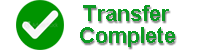
<style>
.page{position:relative;width:200px;height:50px;background:#ffffff}
.page>*{position:absolute;margin:0}
.t1{font:22px "Arial-BoldMT";color:#0c9a23}
</style>
<div class="page">
<p class="t1" style="left:83px;top:5px;width:86px;height:16px">Transfer</p>
<p class="t1" style="left:80px;top:27px;width:95px;height:20px">Complete</p>
</div>
